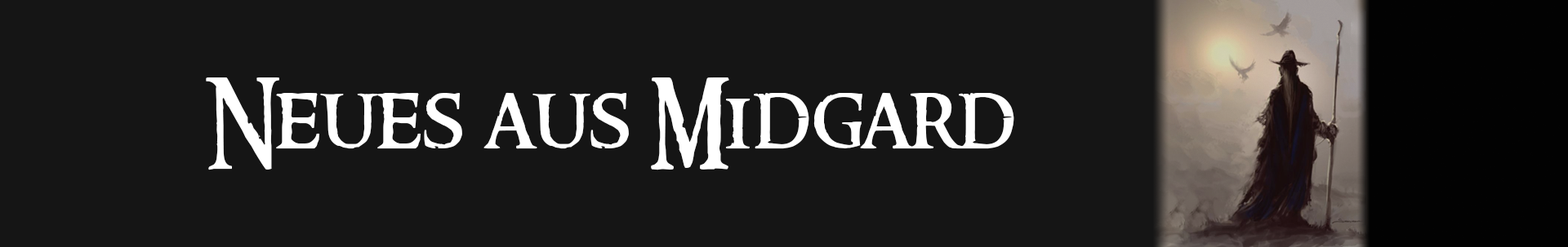
<style>
.page{position:relative;width:1568px;height:247px;background:#151515}
.page>*{position:absolute;margin:0}
.t1{font:88.2px "RingbearerMedium";color:#ffffff}
</style>
<div class="page">
<p class="t1" style="left:206px;top:78px;width:808px;height:93px">Neues aus Midgard</p>
</div>
